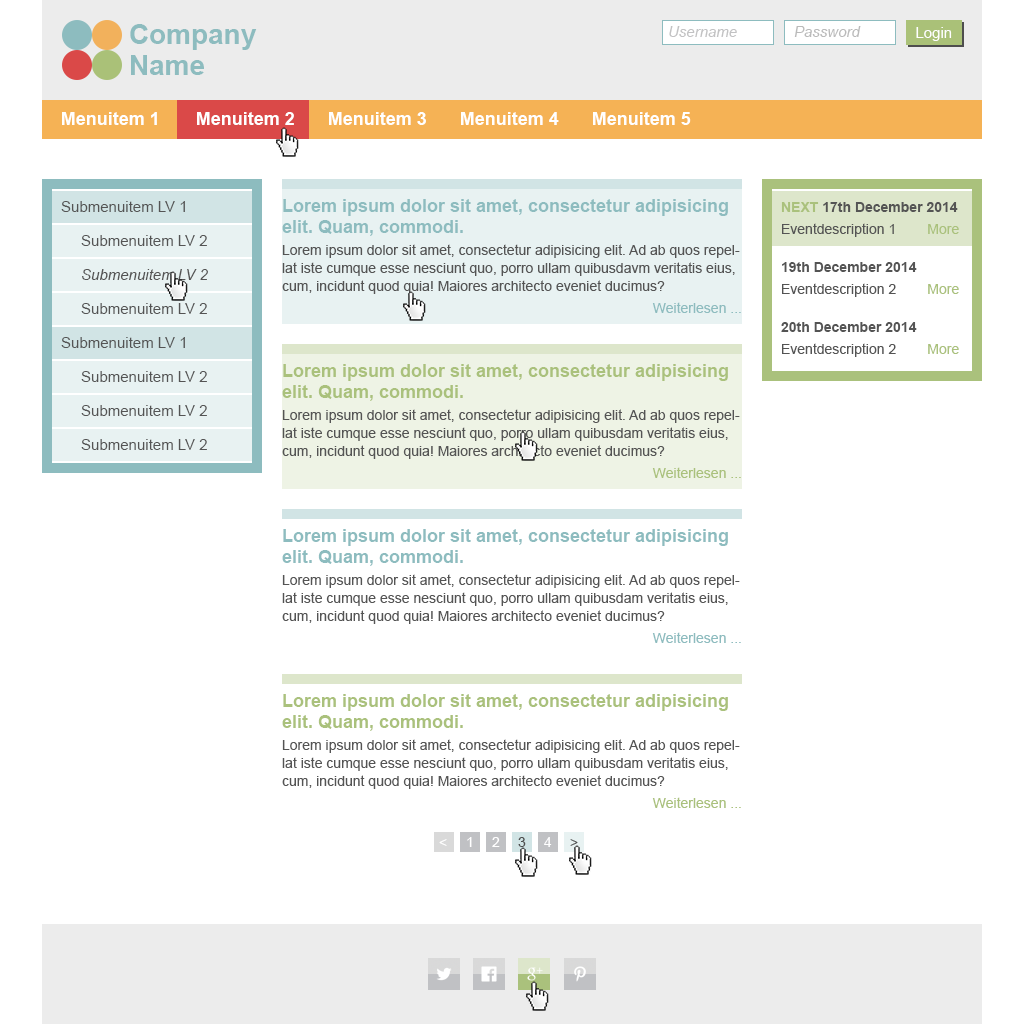
<style>
.page{position:relative;width:1024px;height:1024px;background:#ffffff}
.page>*{position:absolute;margin:0}
.t1{font:28px/31px "Arial-BoldMT";color:#8dbcbf}
.t2{font:15px "Arial-ItalicMT";color:#c2c2c3}
.t3{font:15px "Arial-ItalicMT";color:#bababa}
.t4{font:15px "ArialMT";color:#ffffff}
.t5{font:18px "Arial-BoldMT";color:#ffffff}
.t6{font:15px "ArialMT";color:#545454}
.t7{font:14px/18px "ArialMT";color:#545454}
.t8{font:18px "Arial-BoldMT";color:#8dbcbf}
.t9{font:14px/18px "ArialMT";color:#8dbcbf}
.t10{font:14px/18px "Arial-BoldMT";color:#545454}
.t11{font:14px/18px "Arial-BoldMT";color:#aac17c}
.t12{font:14px/18px "ArialMT";color:#aac17c}
.t13{font:15px "Arial-ItalicMT";color:#545454}
.t14{font:18px "Arial-BoldMT";color:#aac17c}
.t15{font:14px "ArialMT";color:#ffffff}
.t16{font:14px "ArialMT";color:#4e4e4e}
</style>
<div class="page">
<p class="t1" style="left:130px;top:24px;width:127px;height:51px">Company<br>Name</p>
<p class="t2" style="left:669px;top:26px;width:68px;height:11px">Username</p>
<p class="t3" style="left:794px;top:26px;width:67px;height:11px">Password</p>
<p class="t4" style="left:916px;top:27px;width:36px;height:14px">Login</p>
<p class="t5" style="left:62px;top:112px;width:95px;height:13px">Menuitem 1</p>
<p class="t5" style="left:197px;top:112px;width:97px;height:13px">Menuitem 2</p>
<p class="t5" style="left:329px;top:112px;width:97px;height:13px">Menuitem 3</p>
<p class="t5" style="left:461px;top:112px;width:98px;height:13px">Menuitem 4</p>
<p class="t5" style="left:593px;top:112px;width:98px;height:13px">Menuitem 5</p>
<p class="t6" style="left:61px;top:201px;width:124px;height:11px">Submenuitem LV 1</p>
<p class="t7" style="left:282px;top:199px;width:459px;height:114px"><span class="t8">Lorem ipsum dolor sit amet, consectetur adipisicing elit. Quam, commodi.<br></span>Lorem ipsum dolor sit amet, consectetur adipisicing elit. Ad ab quos repellat iste cumque esse nesciunt quo, porro ullam quibusdavm veritatis eius, cum, incidunt quod quia! Maiores architecto eveniet ducimus?<br><span class="t9">Weiterlesen ...</span></p>
<p class="t10" style="left:781px;top:202px;width:178px;height:155px"><span class="t11">NEXT </span>17th December 2014<br><span class="t7">Eventdescription 1        </span><span class="t12">More<br></span>19th December 2014<br><span class="t7">Eventdescription 2        </span><span class="t12">More<br></span>20th December 2014<br><span class="t7">Eventdescription 2        </span><span class="t12">More</span></p>
<p class="t6" style="left:81px;top:235px;width:126px;height:11px">Submenuitem LV 2</p>
<p class="t13" style="left:82px;top:269px;width:126px;height:11px">Submenuitem LV 2</p>
<p class="t6" style="left:81px;top:303px;width:126px;height:11px">Submenuitem LV 2</p>
<p class="t6" style="left:61px;top:337px;width:124px;height:11px">Submenuitem LV 1</p>
<p class="t7" style="left:282px;top:364px;width:459px;height:114px"><span class="t14">Lorem ipsum dolor sit amet, consectetur adipisicing elit. Quam, commodi.<br></span>Lorem ipsum dolor sit amet, consectetur adipisicing elit. Ad ab quos repellat iste cumque esse nesciunt quo, porro ullam quibusdam veritatis eius, cum, incidunt quod quia! Maiores architecto eveniet ducimus?<br><span class="t12">Weiterlesen ...</span></p>
<p class="t6" style="left:81px;top:371px;width:126px;height:11px">Submenuitem LV 2</p>
<p class="t6" style="left:81px;top:405px;width:126px;height:11px">Submenuitem LV 2</p>
<p class="t6" style="left:81px;top:439px;width:126px;height:11px">Submenuitem LV 2</p>
<p class="t7" style="left:282px;top:529px;width:459px;height:114px"><span class="t8">Lorem ipsum dolor sit amet, consectetur adipisicing elit. Quam, commodi.<br></span>Lorem ipsum dolor sit amet, consectetur adipisicing elit. Ad ab quos repellat iste cumque esse nesciunt quo, porro ullam quibusdam veritatis eius, cum, incidunt quod quia! Maiores architecto eveniet ducimus?<br><span class="t9">Weiterlesen ...</span></p>
<p class="t7" style="left:282px;top:694px;width:459px;height:114px"><span class="t14">Lorem ipsum dolor sit amet, consectetur adipisicing elit. Quam, commodi.<br></span>Lorem ipsum dolor sit amet, consectetur adipisicing elit. Ad ab quos repellat iste cumque esse nesciunt quo, porro ullam quibusdam veritatis eius, cum, incidunt quod quia! Maiores architecto eveniet ducimus?<br><span class="t12">Weiterlesen ...</span></p>
<p class="t15" style="left:439px;top:839px;width:8px;height:7px">&lt;</p>
<p class="t15" style="left:467px;top:837px;width:5px;height:10px">1</p>
<p class="t15" style="left:492px;top:837px;width:8px;height:10px">2</p>
<p class="t16" style="left:518px;top:837px;width:8px;height:10px">3</p>
<p class="t15" style="left:544px;top:837px;width:8px;height:10px">4</p>
<p class="t16" style="left:570px;top:839px;width:8px;height:7px">&gt;</p>
</div>
